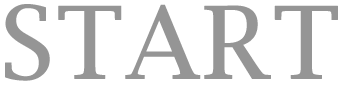
<style>
.page{position:relative;width:342px;height:87px;background:#ffffff}
.page>*{position:absolute;margin:0}
.t1{font:100px "LucidaBright";color:#959595;font-weight:bold}
</style>
<div class="page">
<p class="t1" style="left:5px;top:4px;width:333px;height:77px">START</p>
</div>
